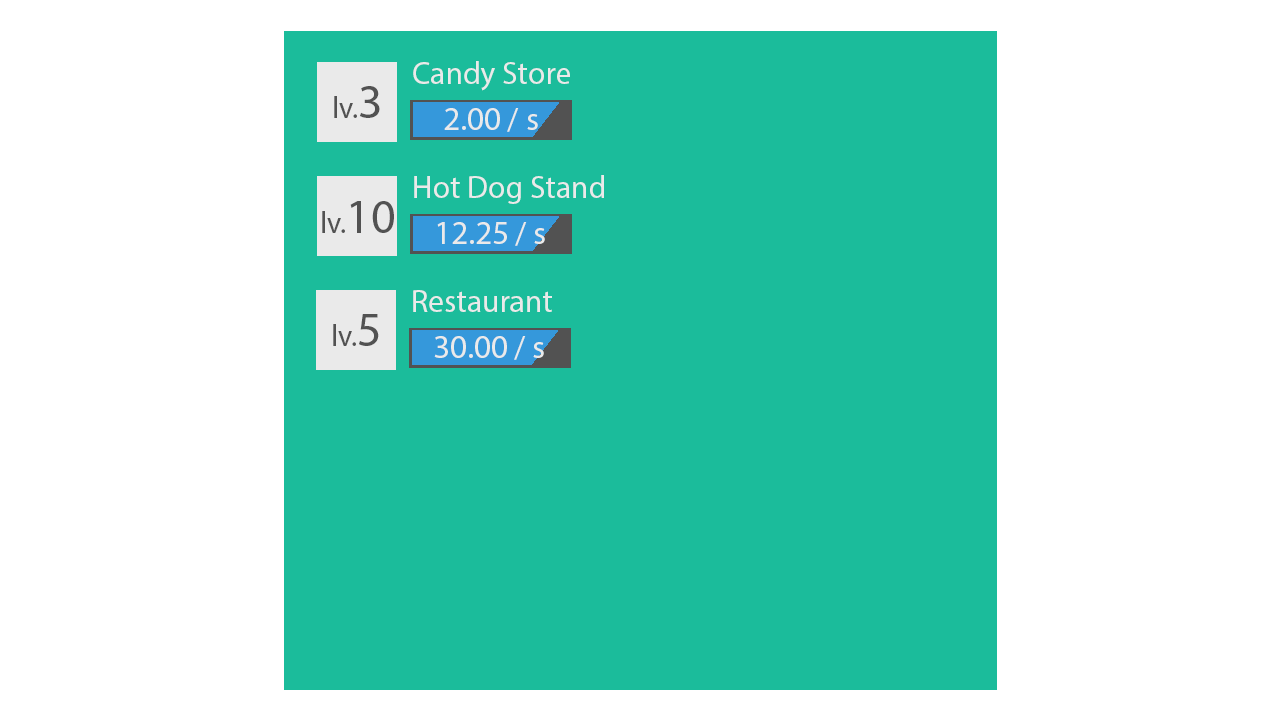
<style>
.page{position:relative;width:1280px;height:720px;background:#ffffff}
.page>*{position:absolute;margin:0}
.t1{font:31.6px "MyriadPro-Regular";color:#eaeaea}
.t2{font:30px "MyriadPro-Regular";color:#525252}
.t3{font:48px "MyriadPro-Regular";color:#525252}
.t4{font:32.7px "MyriadPro-Regular";color:#eaeaea}
</style>
<div class="page">
<p class="t1" style="left:413px;top:61px;width:157px;height:30px">Candy Store</p>
<p class="t2" style="left:334px;top:86px;width:46px;height:32px">lv.<span class="t3">3</span></p>
<p class="t4" style="left:444px;top:108px;width:94px;height:24px">2.00 / s</p>
<p class="t1" style="left:414px;top:175px;width:190px;height:29px">Hot Dog Stand</p>
<p class="t2" style="left:322px;top:201px;width:72px;height:32px">lv.<span class="t3">10</span></p>
<p class="t4" style="left:437px;top:222px;width:108px;height:24px">12.25 / s</p>
<p class="t1" style="left:413px;top:290px;width:139px;height:22px">Restaurant</p>
<p class="t2" style="left:333px;top:314px;width:46px;height:32px">lv.<span class="t3">5</span></p>
<p class="t4" style="left:434px;top:336px;width:110px;height:24px">30.00 / s</p>
</div>
